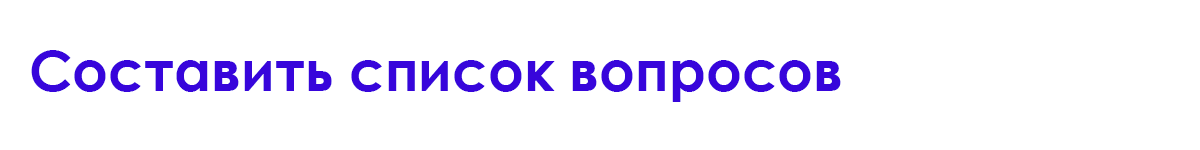
<style>
.page{position:relative;width:1200px;height:150px;background:#ffffff}
.page>*{position:absolute;margin:0}
.t1{font:56px "CenturyGothic-Bold";color:#3705db}
</style>
<div class="page">
<p class="t1" style="left:31px;top:50px;width:810px;height:52px">Составить список вопросов</p>
</div>
